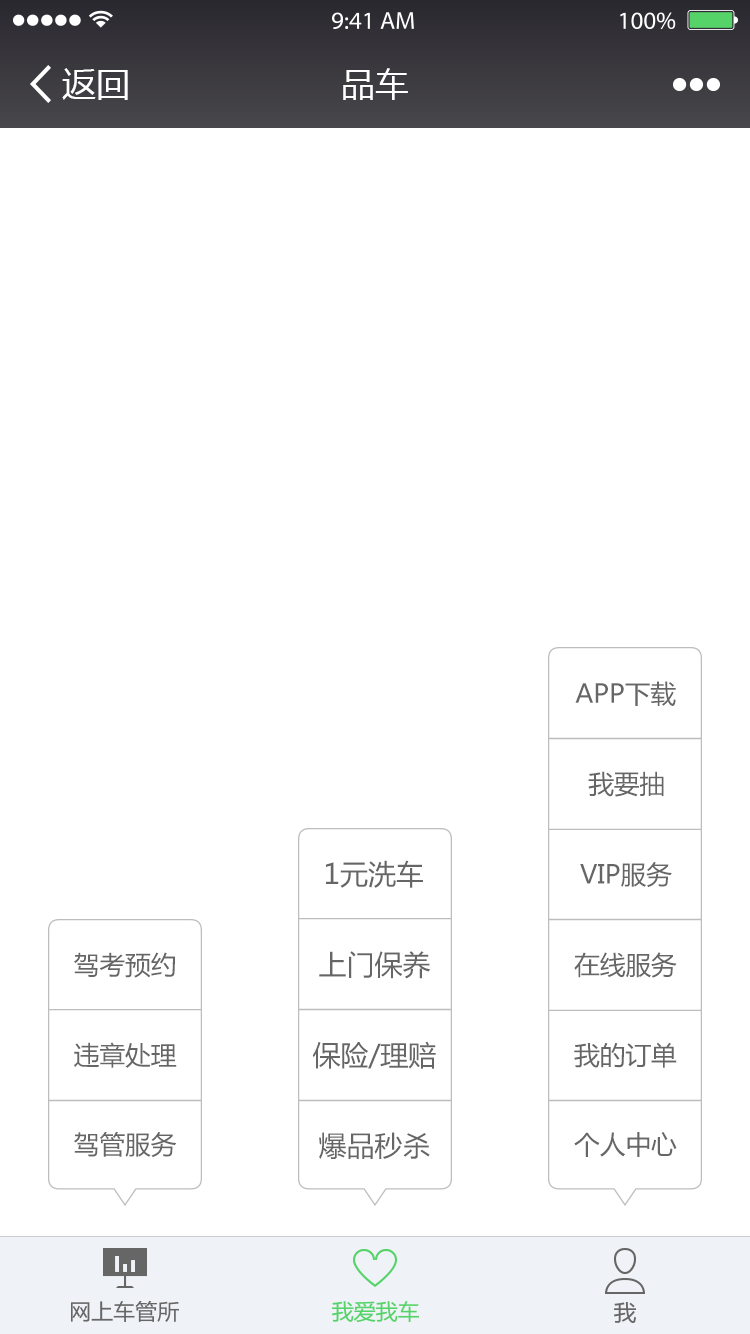
<style>
.page{position:relative;width:750px;height:1334px;background:#ffffff}
.page>*{position:absolute;margin:0}
.t1{font:34px "MicrosoftYaHei";color:#ffffff}
.t2{font:25.7px "MicrosoftYaHei";color:#666666}
.t3{font:28px "MicrosoftYaHei";color:#666666}
</style>
<div class="page">
<p class="t1" style="left:62px;top:68px;width:66px;height:32px">返回</p>
<p class="t1" style="left:343px;top:68px;width:65px;height:32px">品车</p>
<p class="t2" style="left:575px;top:681px;width:101px;height:25px">APP下载</p>
<p class="t2" style="left:588px;top:771px;width:76px;height:26px">我要抽</p>
<p class="t3" style="left:326px;top:860px;width:97px;height:28px">1元洗车</p>
<p class="t2" style="left:580px;top:861px;width:92px;height:26px">VIP服务</p>
<p class="t2" style="left:74px;top:952px;width:101px;height:26px">驾考预约</p>
<p class="t3" style="left:319px;top:951px;width:111px;height:28px">上门保养</p>
<p class="t2" style="left:574px;top:952px;width:103px;height:26px">在线服务</p>
<p class="t2" style="left:74px;top:1042px;width:103px;height:26px">违章处理</p>
<p class="t3" style="left:312px;top:1041px;width:124px;height:28px">保险/理赔</p>
<p class="t2" style="left:574px;top:1042px;width:103px;height:26px">我的订单</p>
<p class="t2" style="left:74px;top:1131px;width:103px;height:26px">驾管服务</p>
<p class="t3" style="left:319px;top:1132px;width:111px;height:27px">爆品秒杀</p>
<p class="t2" style="left:574px;top:1132px;width:103px;height:25px">个人中心</p>
</div>
